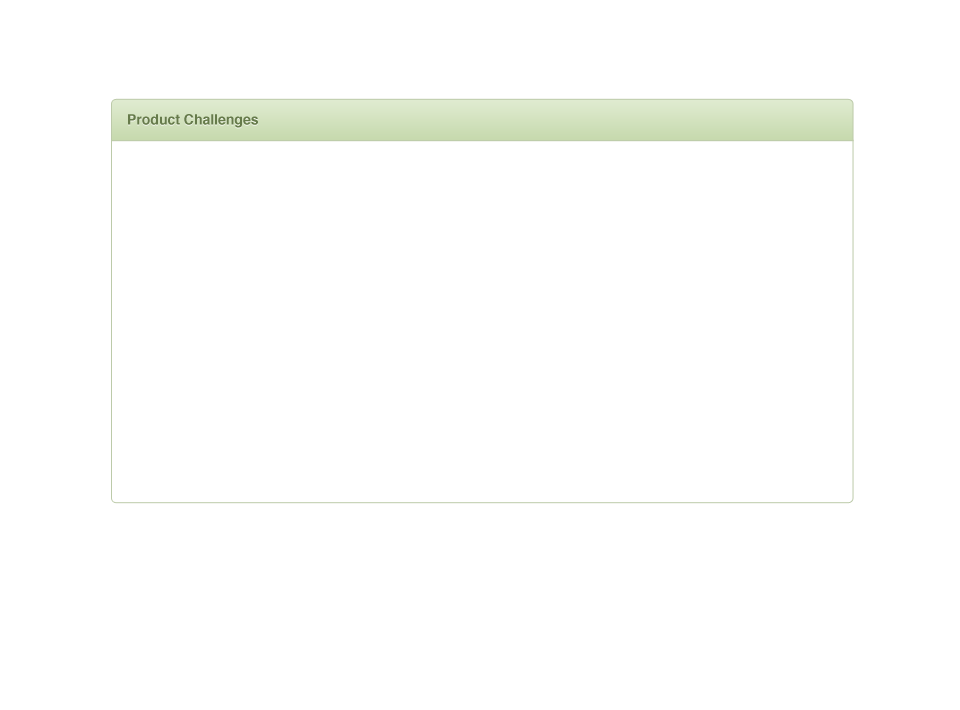
<style>
.page{position:relative;width:960px;height:710px;background:#ffffff}
.page>*{position:absolute;margin:0}
.t1{font:14px "Helvetica-Bold";color:#667b4b}
</style>
<div class="page">
<p class="t1" style="left:128px;top:114px;width:130px;height:14px">Product Challenges</p>
</div>
